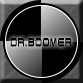
<style>
.page{position:relative;width:83px;height:83px;background:#000000}
.page>*{position:absolute;margin:0}
.t1{font:11.4px "TerminatorCyr4-Semi-expandedBold";letter-spacing:0.12em;color:#000000;scale:0.5 1}
</style>
<div class="page">
<p class="t1" style="left:10px;top:38px;width:62px;height:9px">Dr.boomer</p>
</div>
